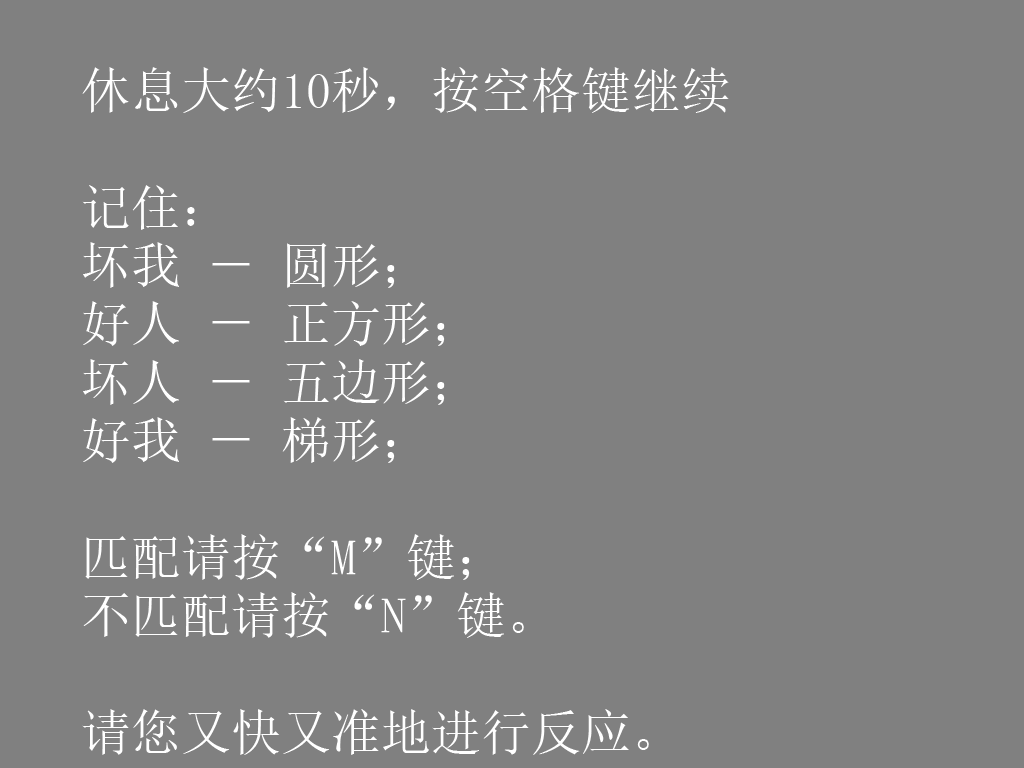
<style>
.page{position:relative;width:1024px;height:768px;background:#808080}
.page>*{position:absolute;margin:0}
.t1{font:50px/58.3px "SimSun";color:#ffffff}
</style>
<div class="page">
<p class="t1" style="left:82px;top:67px;width:647px;height:688px">休息大约10秒，按空格键继续<br><br>记住：<br>坏我 － 圆形； <br>好人 － 正方形；<br>坏人 － 五边形；<br>好我 － 梯形；<br><br>匹配请按“M”键；<br>不匹配请按“N”键。<br><br>请您又快又准地进行反应。</p>
</div>
